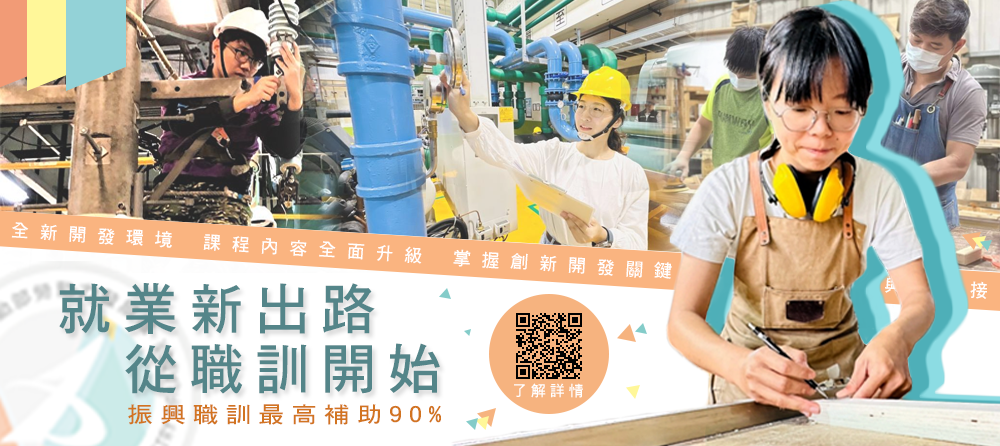
<style>
.page{position:relative;width:1000px;height:446px}
.page>*{position:absolute;margin:0}
.t1{font:55px/60px "DFHei-W7-WIN-BF";letter-spacing:0.2em;color:#548589}
.t2{font:15px "DFHei-W7-WIN-BF";letter-spacing:0.26em;color:#ffffff}
.t3{font:22.1px "DFHei-W7-WIN-BF";letter-spacing:0.26em;color:#d27421;scale:1.18 1}
</style>
<div class="page">
<p class="t1" style="left:59px;top:283px;width:381px;height:111px">就業新出路<br>  從職訓開始</p>
<p class="t2" style="left:514px;top:383px;width:69px;height:15px">了解詳情</p>
<p class="t3" style="left:128px;top:404px;width:313px;height:21px">振興職訓最高補助90%</p>
</div>
